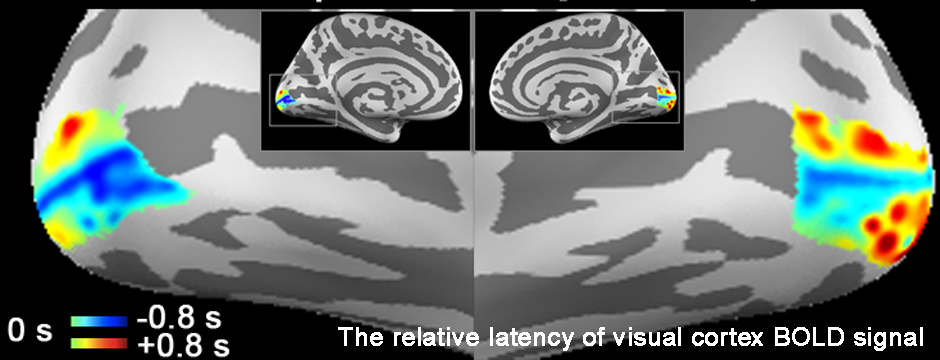
<style>
.page{position:relative;width:940px;height:360px;background:#000000}
.page>*{position:absolute;margin:0}
.t1{font:25px "ArialMT";color:#ffffff;font-weight:bold}
</style>
<div class="page">
<p class="t1" style="left:338px;top:327px;width:585px;height:24px">The relative latency of visual cortex BOLD signal</p>
</div>
